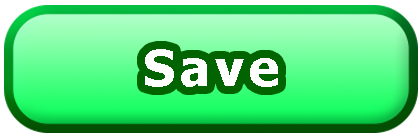
<style>
.page{position:relative;width:420px;height:135px}
.page>*{position:absolute;margin:0}
.t1{font:50px "Tahoma-Bold";letter-spacing:0.1em;color:#ffffff}
</style>
<div class="page">
<p class="t1" style="left:145px;top:49px;width:133px;height:38px">Save</p>
</div>
